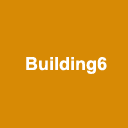
<style>
.page{position:relative;width:128px;height:128px;background:#d78a05}
.page>*{position:absolute;margin:0}
.t1{font:18px "Arial-BoldMT";color:#ffffff}
</style>
<div class="page">
<p class="t1" style="left:26px;top:57px;width:81px;height:17px">Building6</p>
</div>
